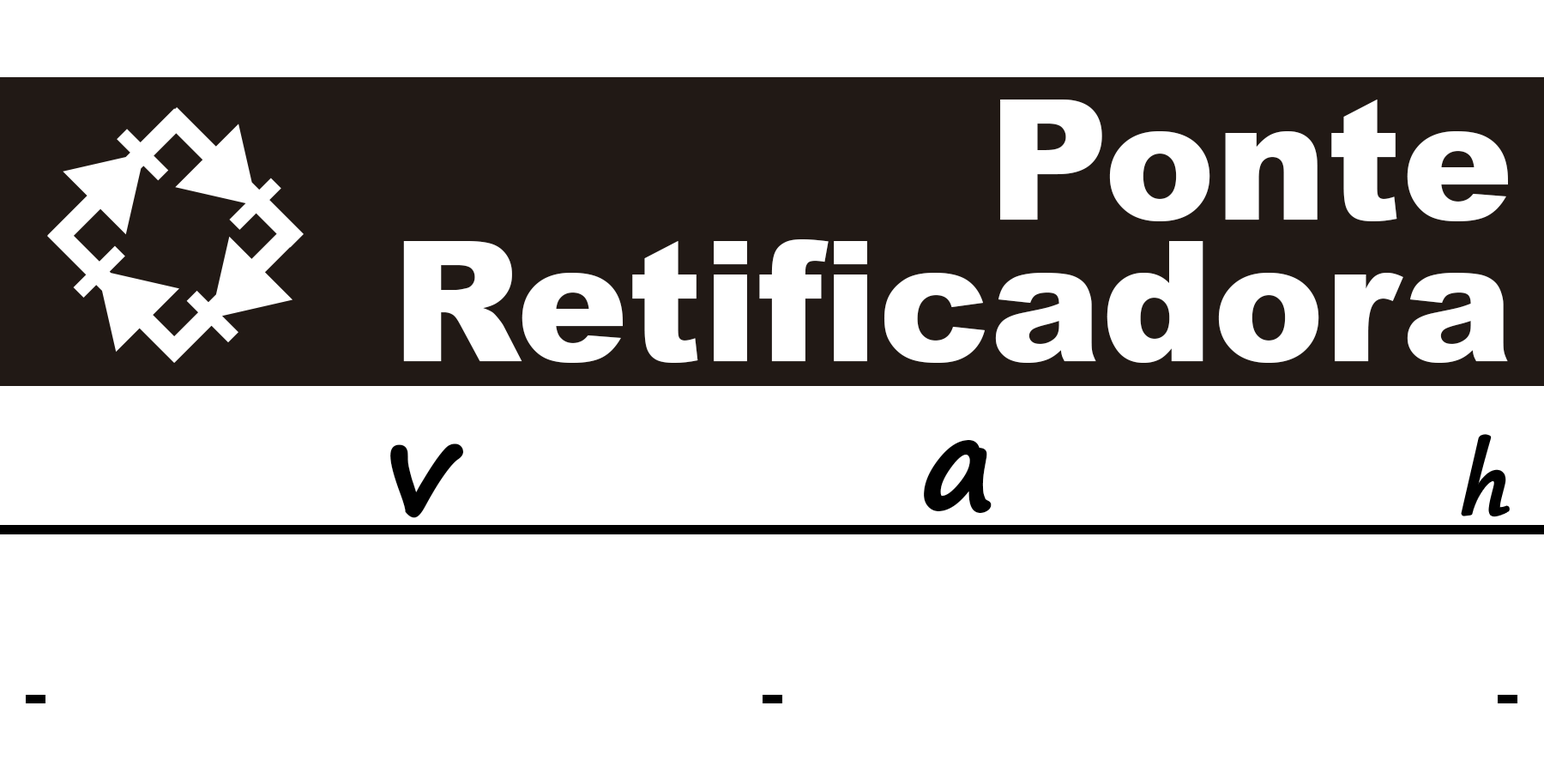
<style>
.page{position:relative;width:1544px;height:772px;background:#ffffff}
.page>*{position:absolute;margin:0}
.t1{font:167.1px/141.6px "Arial-Black";color:#ffffff}
.t2{font:114.6px "Gabriola";letter-spacing:-0.025em;color:#010101;font-weight:bold;font-style:italic}
.t3{font:127.1px "SegoePrint-Bold";letter-spacing:-0.01em;color:#010101;font-weight:bold}
.t4{font:127.1px "Arial-BoldMT";letter-spacing:-0.01em;color:#010101}
</style>
<div class="page">
<p class="t1" style="left:403px;top:100px;width:1105px;height:263px;text-align:right">Ponte<br>Retificadora</p>
<p class="t2" style="left:1463px;top:436px;width:45px;height:80px">h</p>
<p class="t3" style="left:390px;top:444px;width:74px;height:74px">v</p>
<p class="t3" style="left:924px;top:439px;width:68px;height:75px"><span class="t4">   </span>a</p>
</div>
